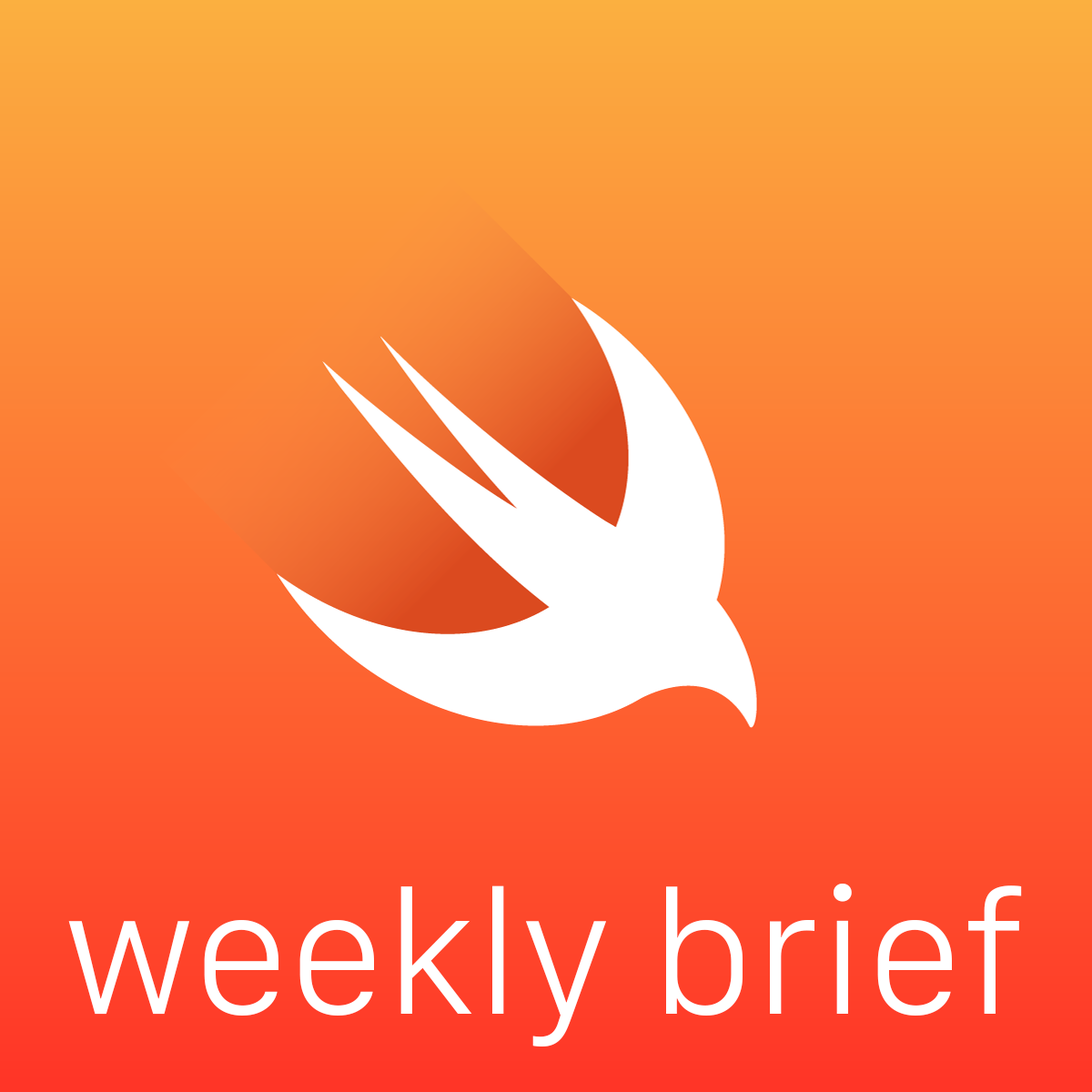
<style>
.page{position:relative;width:1092px;height:1092px}
.page>*{position:absolute;margin:0}
.t1{font:182px "SanFranciscoText-Light";letter-spacing:-0.01em;color:#ffffff}
</style>
<div class="page">
<p class="t1" style="left:68px;top:884px;width:954px;height:162px">weekly brief</p>
</div>
